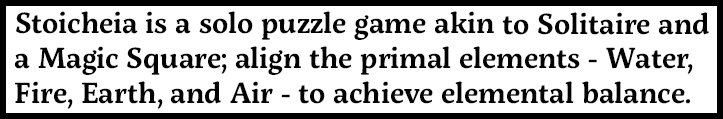
<style>
.page{position:relative;width:723px;height:119px;background:#ffffff}
.page>*{position:absolute;margin:0}
.t1{font:29px "ServusSlab-SemiBold";color:#020202}
</style>
<div class="page">
<p class="t1" style="left:14px;top:11px;width:695px;height:98px">Stoicheia is a solo puzzle game akin to Solitaire and a Magic Square; align the primal elements - Water, Fire, Earth, and Air - to achieve elemental balance.</p>
</div>
